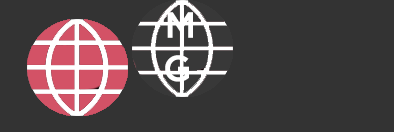
<style>
.page{position:relative;width:394px;height:132px;background:#333333}
.page>*{position:absolute;margin:0}
.t1{font:36.1px "iCielGotham-Medium";color:#ffffff}
.t2{font:36.1px "iCielGotham-Medium";color:#d35266}
</style>
<div class="page">
<p class="t1" style="left:165px;top:12px;width:28px;height:70px"><span class="t2">  </span>M<br>  G<br><span class="t2">G</span></p>
</div>
